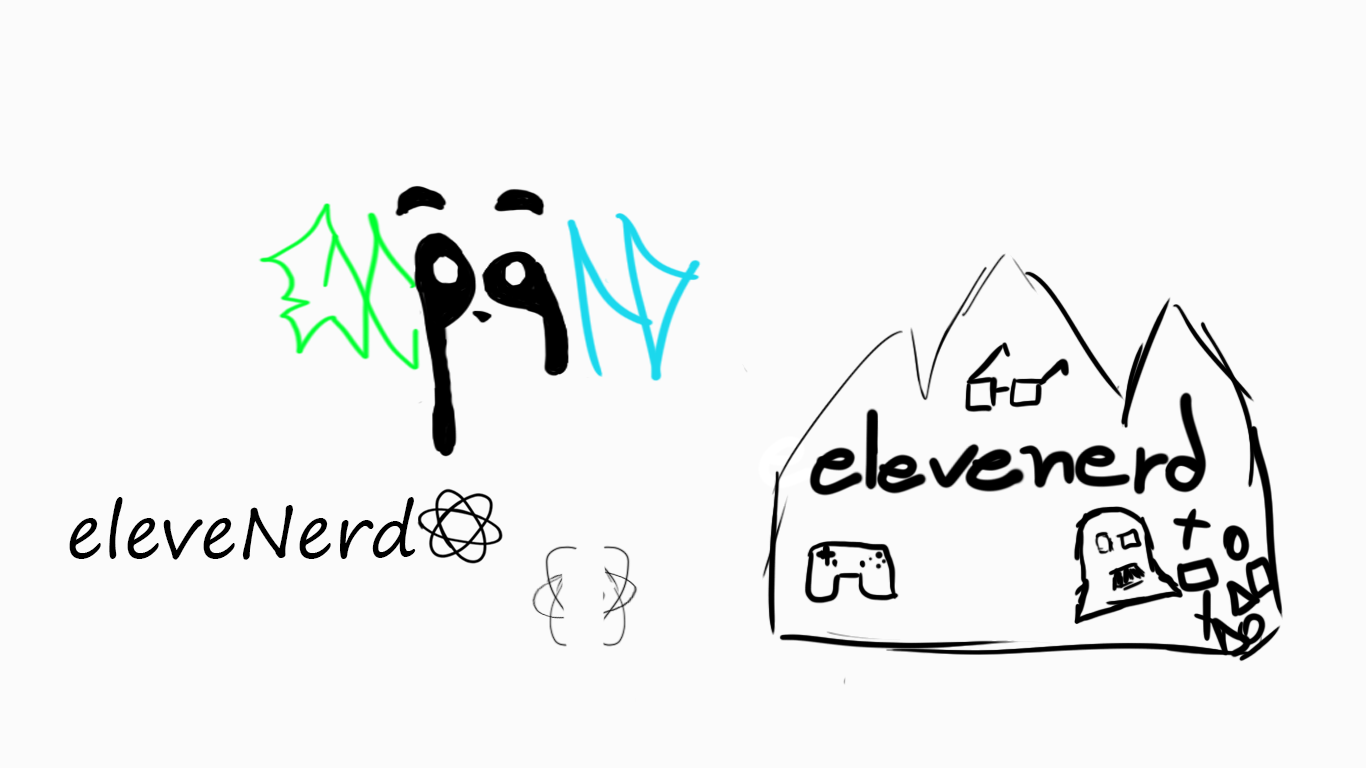
<style>
.page{position:relative;width:1366px;height:768px;background:#fbfbfb}
.page>*{position:absolute;margin:0}
.t1{font:72px "SegoePrint";color:#000000}
</style>
<div class="page">
<p class="t1" style="left:69px;top:497px;width:347px;height:63px">eleveNerd</p>
</div>
